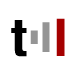
<style>
.page{position:relative;width:80px;height:80px;background:#ffffff}
.page>*{position:absolute;margin:0}
.t1{font:52px "HelveticaNeue-CondensedBold";color:#000000}
.t2{font:18.7px "HelveticaNeue-CondensedBold";color:#959595;scale:2.61 1}
.t3{font:41.6px "HelveticaNeue-CondensedBold";color:#959595;scale:1.17 1}
.t4{font:52px "HelveticaNeue-CondensedBold";color:#a50000}
</style>
<div class="page">
<p class="t1" style="left:11px;top:18px;width:54px;height:39px">t <span class="t2">l</span><span class="t3">l </span><span class="t4">I</span></p>
</div>
